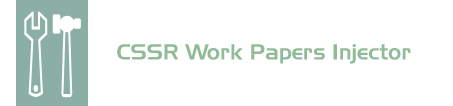
<style>
.page{position:relative;width:453px;height:106px;background:#ffffff}
.page>*{position:absolute;margin:0}
.t1{font:22px "Slicker";color:#91bb98}
</style>
<div class="page">
<p class="t1" style="left:117px;top:44px;width:294px;height:20px">CSSR Work Papers Injector</p>
</div>
